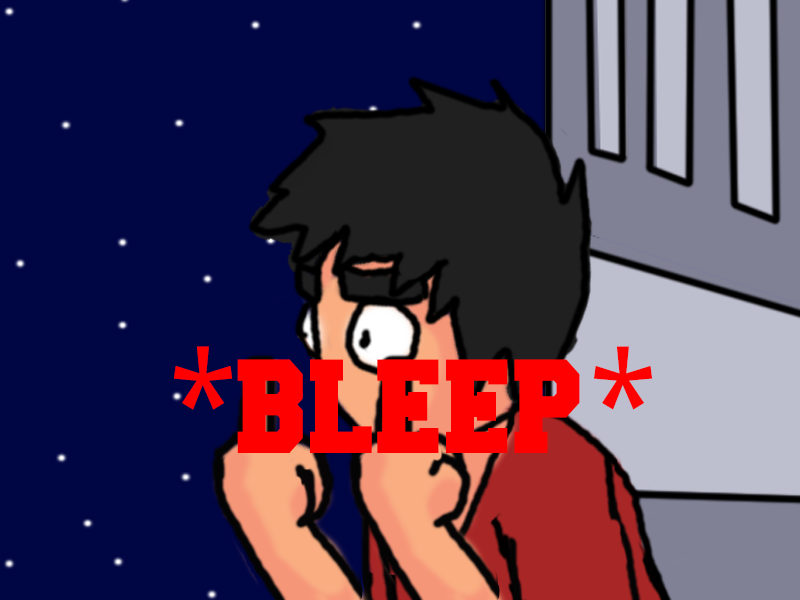
<style>
.page{position:relative;width:800px;height:600px;background:#000543}
.page>*{position:absolute;margin:0}
.t1{font:140px "Freshman";letter-spacing:0.005em;color:#ff0000;scale:0.89 1}
.t2{font:140px "OpenSans";letter-spacing:0.005em;color:#ff0000;scale:0.89 1}
</style>
<div class="page">
<p class="t1" style="left:174px;top:346px;width:478px;height:107px"><span class="t2">*</span>bleep<span class="t2">*</span></p>
</div>
